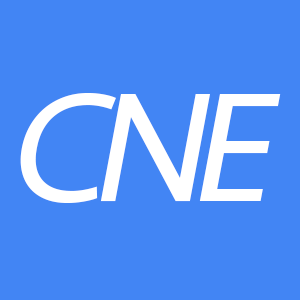
<style>
.page{position:relative;width:300px;height:300px;background:#4285f4}
.page>*{position:absolute;margin:0}
.t1{font:162.8px "Seravek";letter-spacing:-0.1em;color:#ffffff}
.t2{font:162.8px "Seravek";letter-spacing:-0.08em;color:#ffffff}
</style>
<div class="page">
<p class="t1" style="left:20px;top:93px;width:261px;height:110px">CN<span class="t2">E</span></p>
</div>
